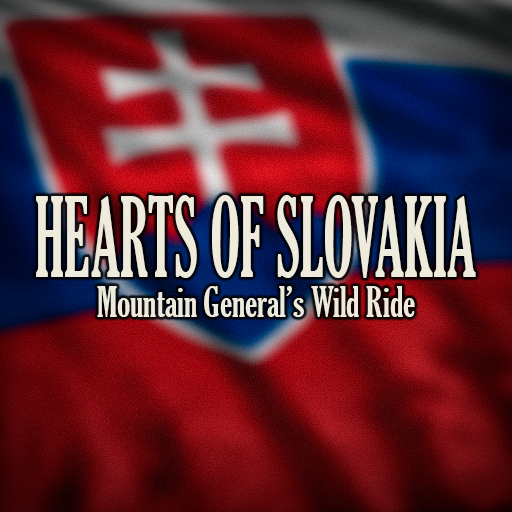
<style>
.page{position:relative;width:512px;height:512px}
.page>*{position:absolute;margin:0}
.t1{font:106.9px "GloucesterMT-ExtraCondensed";color:#eeebdc;scale:0.63 1}
.t2{font:40.2px "GloucesterMT-ExtraCondensed";color:#eeebdc;scale:0.96 1}
</style>
<div class="page">
<p class="t1" style="left:36px;top:195px;width:440px;height:83px">HEARTS OF SLOVAKIA</p>
<p class="t2" style="left:97px;top:286px;width:318px;height:31px">Mountain General’s Wild Ride</p>
</div>
